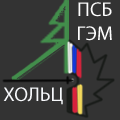
<style>
.page{position:relative;width:120px;height:120px;background:#333333}
.page>*{position:absolute;margin:0}
.t1{font:20px "MyriadPro-Regular";color:#fdfdfd}
.t2{font:20px "MyriadPro-Regular";color:#f6f8fb}
</style>
<div class="page">
<p class="t1" style="left:78px;top:2px;width:34px;height:39px;text-align:center">ПСБ<br>ГЭМ</p>
<p class="t2" style="left:3px;top:87px;width:60px;height:18px">ХОЛЬЦ</p>
</div>
